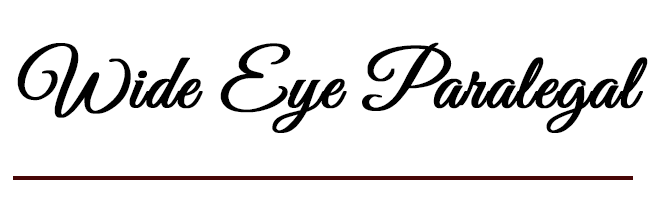
<style>
.page{position:relative;width:656px;height:200px;background:#ffffff}
.page>*{position:absolute;margin:0}
.t1{font:79.2px "GreatVibes-Regular";color:#000000;font-weight:bold}
</style>
<div class="page">
<p class="t1" style="left:17px;top:42px;width:631px;height:91px">Wide Eye Paralegal</p>
</div>
